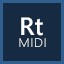
<style>
.page{position:relative;width:64px;height:64px;background:#162b41}
.page>*{position:absolute;margin:0}
.t1{font:25px "SegoeUI-Semibold";color:#ffffff}
.t2{font:16.7px "SegoeUI-Light";color:#ffffff;font-variant:small-caps}
</style>
<div class="page">
<p class="t1" style="left:21px;top:17px;width:22px;height:19px">Rt</p>
<p class="t2" style="left:19px;top:38px;width:27px;height:9px">midi</p>
</div>
